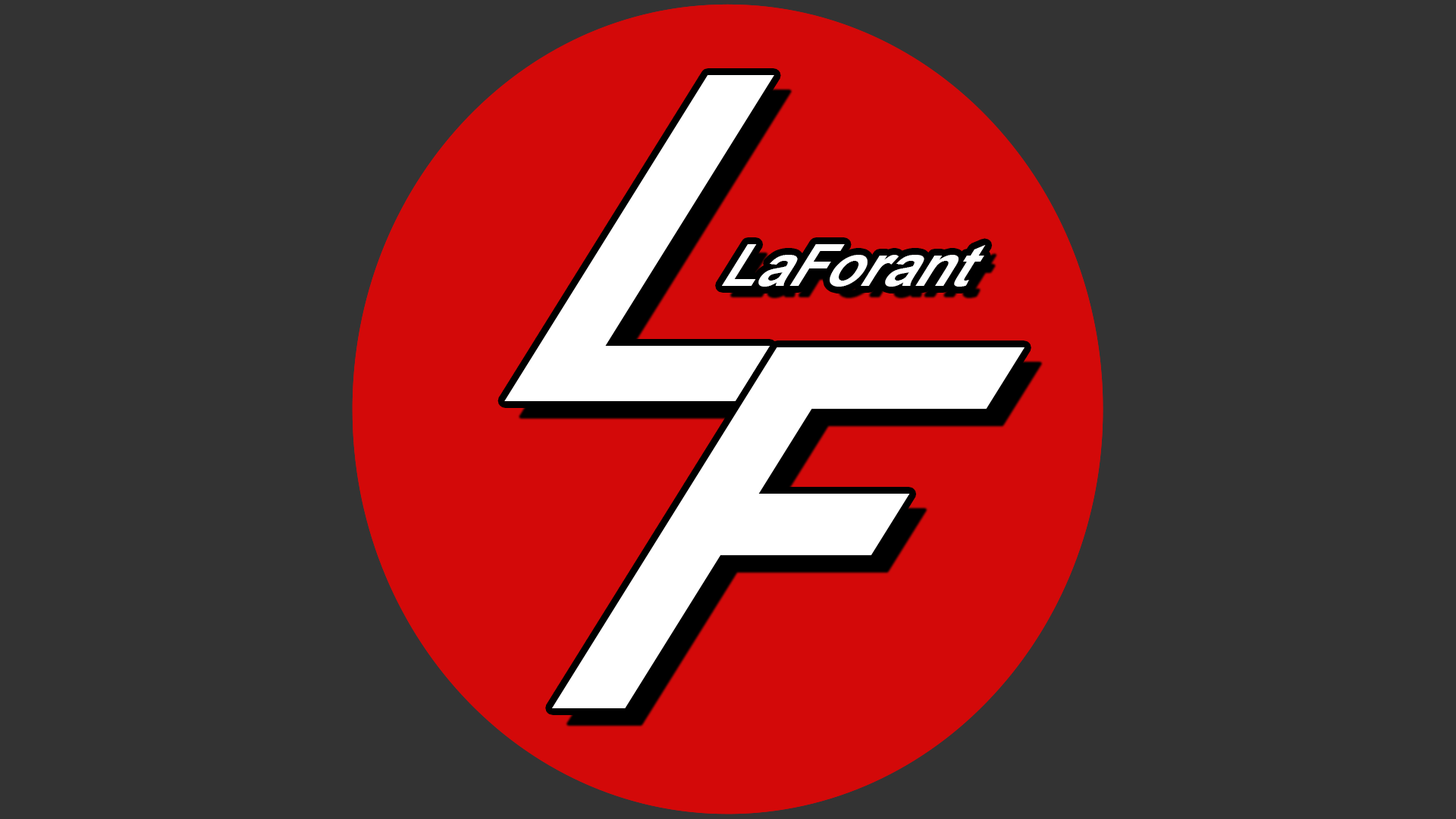
<style>
.page{position:relative;width:1456px;height:819px;background:#333333}
.page>*{position:absolute;margin:0}
.t1{font:540.6px "Arial-BoldMT";color:#ffffff;scale:0.85 1}
.t2{font:68.7px "Arial-BoldMT";color:#ffffff;scale:0.85 1}
.t3{font:594.6px "Arial-BoldMT";color:#ffffff;scale:0.85 1}
</style>
<div class="page">
<p class="t1" style="left:504px;top:75px;width:270px;height:326px">L</p>
<p class="t2" style="left:722px;top:244px;width:264px;height:43px">LaForant</p>
<p class="t3" style="left:552px;top:347px;width:472px;height:361px">F</p>
</div>
